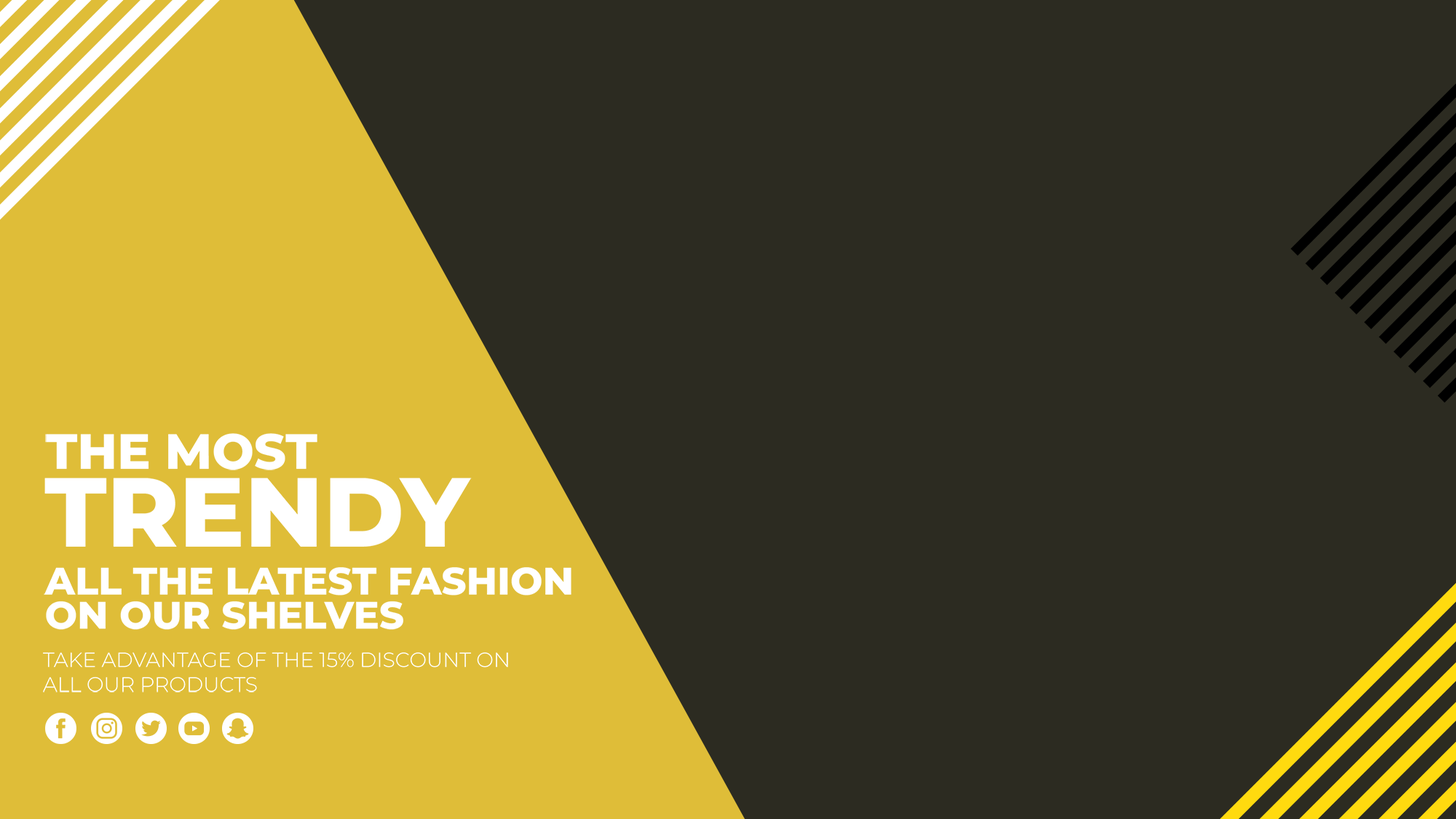
<style>
.page{position:relative;width:1456px;height:819px;background:#2c2b21}
.page>*{position:absolute;margin:0}
.t1{font:49.5px "Montserrat-ExtraBold";color:#ffffff;text-transform:uppercase}
.t2{font:97.7px "Montserrat-ExtraBold";color:#ffffff;text-transform:uppercase}
.t3{font:38.4px/34.1px "Montserrat-ExtraBold";color:#ffffff;text-transform:uppercase}
.t4{font:20.5px "Montserrat-Light";color:#ffffff;text-transform:uppercase}
</style>
<div class="page">
<p class="t1" style="left:45px;top:433px;width:272px;height:37px">the most</p>
<p class="t2" style="left:44px;top:478px;width:428px;height:69px">trendy</p>
<p class="t3" style="left:44px;top:567px;width:527px;height:63px">all the latest fashion<br>on our shelves</p>
<p class="t4" style="left:43px;top:652px;width:465px;height:40px">take advantage of the 15% discount on <br>all our products</p>
</div>
